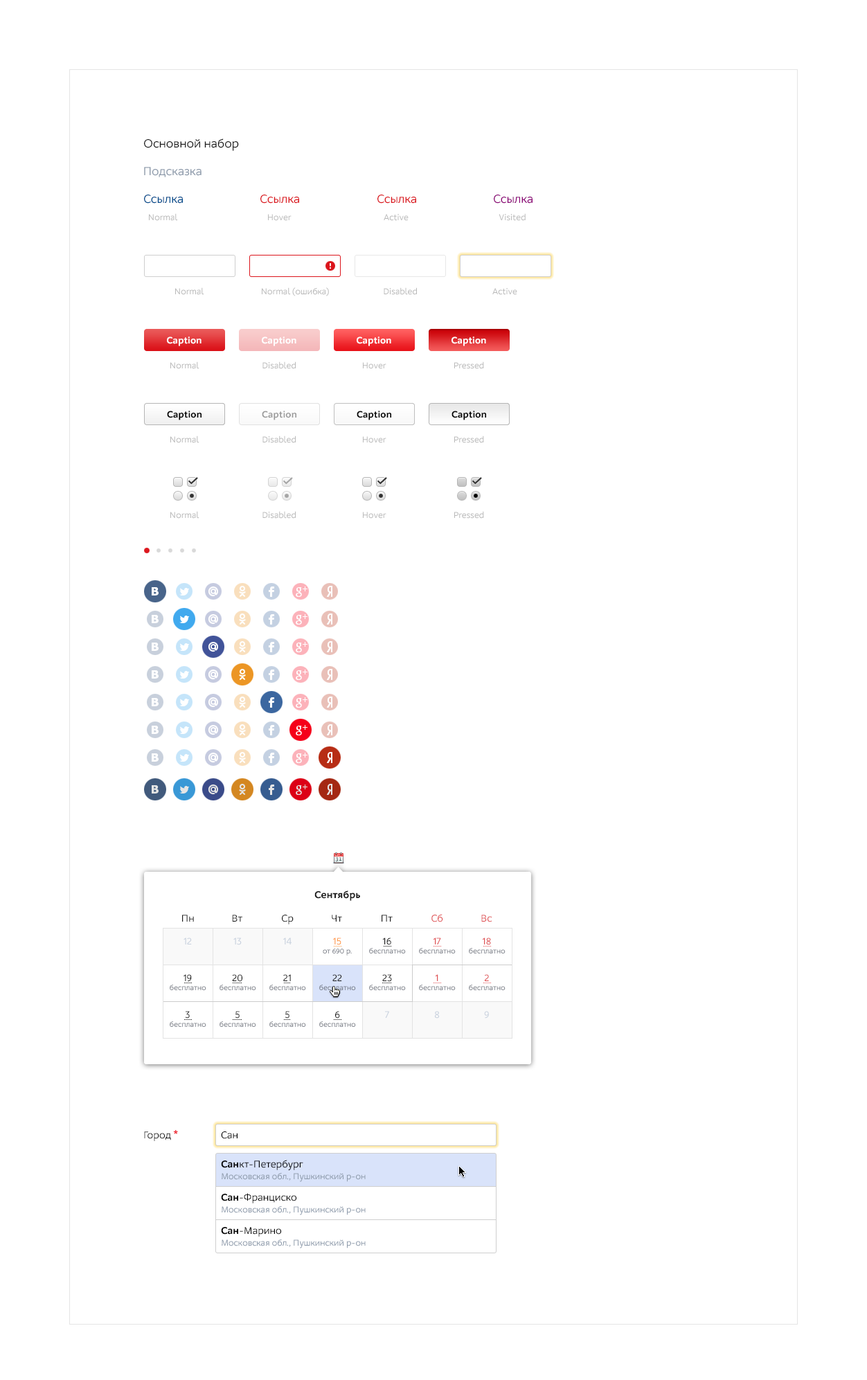
<style>
.page{position:relative;width:867px;height:1380px;background:#ffffff}
.page>*{position:absolute;margin:0}
.t1{font:12.5px "M.Video-Regular";color:#1b1b1b}
.t2{font:12.5px "M.Video-Regular";color:#8c99aa}
.t3{font:12.5px "M.Video-Regular";color:#004b8c}
.t4{font:12.5px "M.Video-Regular";color:#db151c}
.t5{font:12.5px "M.Video-Regular";color:#8c0077}
.t6{font:9px "M.Video-Regular";color:#b8b8b8}
.t7{font:9.7px "M.Video-Bold";color:#ffffff}
.t8{font:9.7px "M.Video-Bold";color:#000000}
.t9{font:9.7px "M.Video-Bold";color:#999999}
.t10{font:10.4px "M.Video-Bold";color:#1b1b1b}
.t11{font:10.4px "M.Video-Regular";color:#1b1b1b}
.t12{font:10.4px "M.Video-Regular";color:#df4e51}
.t13{font:7.6px/9px "M.Video-Regular";color:#626773}
.t14{font:10.4px/27.7px "M.Video-Regular";color:#c8d1de}
.t15{font:10.4px/27.7px "M.Video-Regular";color:#1b1b1b}
.t16{font:10.4px/27.7px "M.Video-Regular";color:#ff953c}
.t17{font:10.4px/27.7px "M.Video-Regular";color:#df4e51}
.t18{font:10.4px "M.Video-Regular";color:#000000}
.t19{font:9px/11.8px "M.Video-Regular";color:#8c99aa}
.t20{font:10.4px/9px "M.Video-Bold";color:#000000}
.t21{font:10.4px/9px "M.Video-Regular";color:#000000}
</style>
<div class="page">
<p class="t1" style="left:144px;top:138px;width:95px;height:13px">Основной набор</p>
<p class="t2" style="left:144px;top:167px;width:57px;height:10px">Подсказка</p>
<p class="t3" style="left:144px;top:195px;width:39px;height:9px">Ссылка</p>
<p class="t4" style="left:260px;top:195px;width:39px;height:9px">Ссылка</p>
<p class="t4" style="left:377px;top:195px;width:39px;height:9px">Ссылка</p>
<p class="t5" style="left:494px;top:195px;width:38px;height:9px">Ссылка</p>
<p class="t6" style="left:149px;top:213px;width:29px;height:8px">Normal</p>
<p class="t6" style="left:268px;top:214px;width:23px;height:7px">Hover</p>
<p class="t6" style="left:384px;top:214px;width:24px;height:7px">Active</p>
<p class="t6" style="left:498px;top:213px;width:27px;height:8px">Visited</p>
<p class="t6" style="left:175px;top:287px;width:29px;height:8px">Normal</p>
<p class="t6" style="left:262px;top:287px;width:67px;height:9px">Normal (ошибка)</p>
<p class="t6" style="left:384px;top:287px;width:33px;height:8px">Disabled</p>
<p class="t6" style="left:492px;top:288px;width:25px;height:7px">Active</p>
<p class="t7" style="left:167px;top:336px;width:34px;height:10px">Caption</p>
<p class="t7" style="left:262px;top:336px;width:34px;height:10px">Caption</p>
<p class="t7" style="left:357px;top:336px;width:34px;height:10px">Caption</p>
<p class="t7" style="left:451px;top:336px;width:35px;height:10px">Caption</p>
<p class="t6" style="left:170px;top:361px;width:29px;height:8px">Normal</p>
<p class="t6" style="left:262px;top:361px;width:34px;height:8px">Disabled</p>
<p class="t6" style="left:363px;top:362px;width:23px;height:7px">Hover</p>
<p class="t6" style="left:454px;top:361px;width:30px;height:8px">Pressed</p>
<p class="t8" style="left:167px;top:411px;width:34px;height:9px">Caption</p>
<p class="t9" style="left:262px;top:411px;width:34px;height:9px">Caption</p>
<p class="t8" style="left:357px;top:411px;width:34px;height:9px">Caption</p>
<p class="t8" style="left:451px;top:411px;width:35px;height:9px">Caption</p>
<p class="t6" style="left:170px;top:435px;width:29px;height:8px">Normal</p>
<p class="t6" style="left:262px;top:435px;width:34px;height:8px">Disabled</p>
<p class="t6" style="left:363px;top:436px;width:23px;height:7px">Hover</p>
<p class="t6" style="left:454px;top:435px;width:30px;height:8px">Pressed</p>
<p class="t6" style="left:170px;top:511px;width:29px;height:8px">Normal</p>
<p class="t6" style="left:262px;top:511px;width:34px;height:8px">Disabled</p>
<p class="t6" style="left:363px;top:512px;width:23px;height:7px">Hover</p>
<p class="t6" style="left:454px;top:511px;width:30px;height:8px">Pressed</p>
<p class="t10" style="left:314px;top:890px;width:46px;height:11px">Сентябрь</p>
<p class="t11" style="left:182px;top:915px;width:12px;height:6px">Пн</p>
<p class="t11" style="left:232px;top:915px;width:10px;height:6px">Вт</p>
<p class="t11" style="left:282px;top:915px;width:12px;height:9px">Ср</p>
<p class="t11" style="left:332px;top:915px;width:10px;height:6px">Чт</p>
<p class="t11" style="left:381px;top:915px;width:12px;height:6px">Пт</p>
<p class="t12" style="left:431px;top:914px;width:12px;height:8px">Сб</p>
<p class="t12" style="left:481px;top:915px;width:11px;height:7px">Вс</p>
<p class="t13" style="left:170px;top:937px;width:36px;height:90px;text-align:center"><span class="t14">12<br> <br></span><span class="t15">19<br></span>бесплатно<br><span class="t15">3<br></span>бесплатно</p>
<p class="t13" style="left:219px;top:937px;width:37px;height:90px;text-align:center"><span class="t14">13<br> <br></span><span class="t15">20<br></span>бесплатно<br><span class="t15">5<br></span>бесплатно</p>
<p class="t13" style="left:269px;top:937px;width:37px;height:90px;text-align:center"><span class="t14">14<br> <br></span><span class="t15">21<br></span>бесплатно<br><span class="t15">5<br></span>бесплатно</p>
<p class="t13" style="left:319px;top:937px;width:37px;height:90px;text-align:center"><span class="t16">15<br></span>от 690 р.<br><span class="t15">22<br></span>бесплатно<br><span class="t15">6<br></span>бесплатно</p>
<p class="t13" style="left:369px;top:937px;width:37px;height:81px;text-align:center"><span class="t15">16<br></span>бесплатно<br><span class="t15">23<br></span>бесплатно<br><span class="t14">7</span></p>
<p class="t13" style="left:419px;top:937px;width:37px;height:81px;text-align:center"><span class="t17">17<br></span>бесплатно<br><span class="t17">1<br></span>бесплатно<br><span class="t14">8</span></p>
<p class="t13" style="left:469px;top:937px;width:36px;height:81px;text-align:center"><span class="t17">18<br></span>бесплатно<br><span class="t17">2<br></span>бесплатно<br><span class="t14">9</span></p>
<p class="t11" style="left:144px;top:1130px;width:34px;height:11px">Город <span class="t10">*</span></p>
<p class="t18" style="left:221px;top:1131px;width:16px;height:8px">Сан</p>
<p class="t19" style="left:221px;top:1160px;width:145px;height:22px"><span class="t20">Сан</span><span class="t21">кт-Петербург<br></span>Московская обл., Пушкинский р-он</p>
<p class="t19" style="left:221px;top:1193px;width:145px;height:22px"><span class="t20">Сан</span><span class="t21">-Франциско<br></span>Московская обл., Пушкинский р-он</p>
<p class="t19" style="left:221px;top:1227px;width:145px;height:21px"><span class="t20">Сан</span><span class="t21">-Марино<br></span>Московская обл., Пушкинский р-он</p>
</div>
